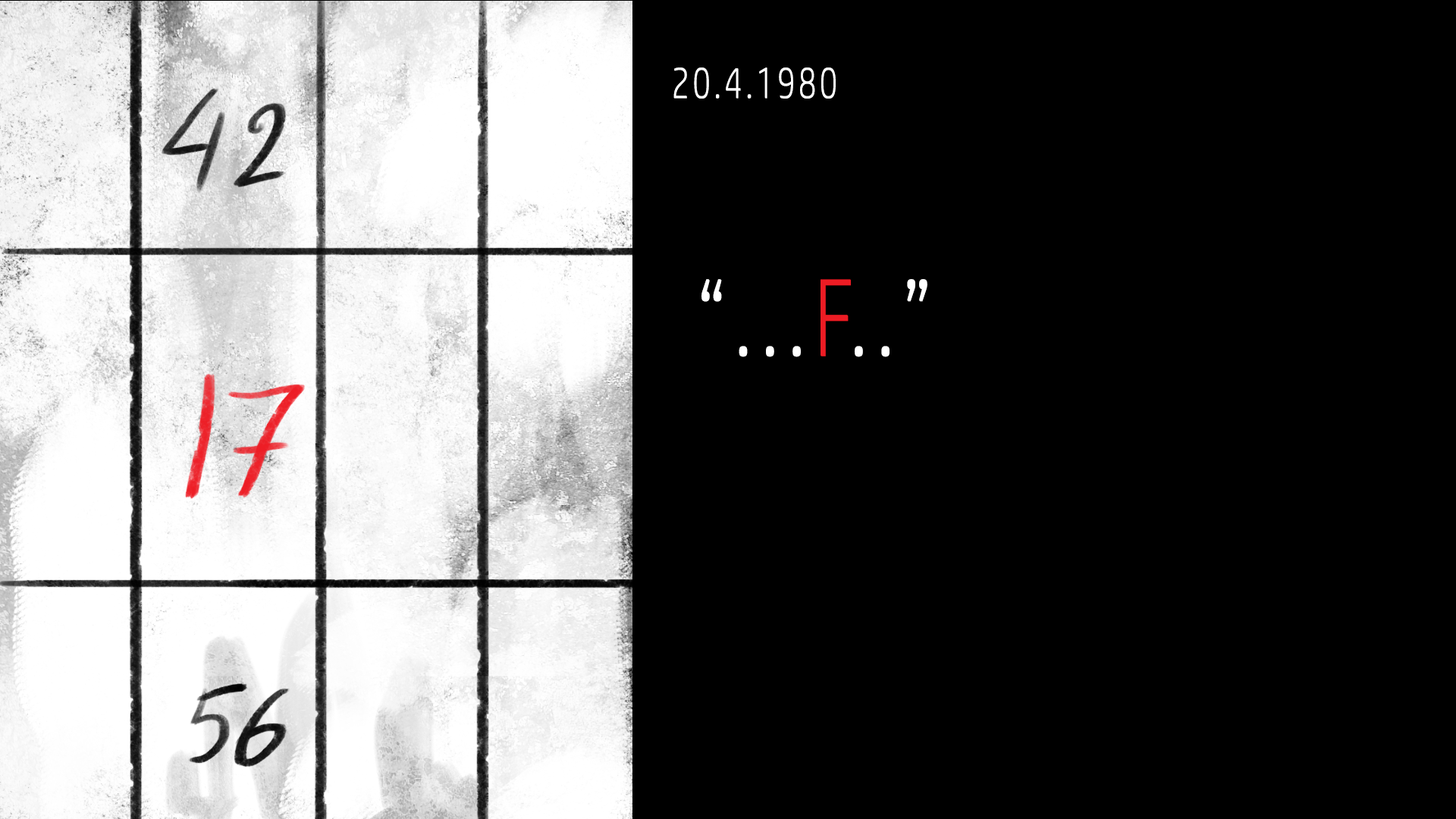
<style>
.page{position:relative;width:1456px;height:819px;background:#000000}
.page>*{position:absolute;margin:0}
.t1{font:18.2px "HPSimplified-Light";letter-spacing:0.1em;color:#ffffff;scale:0.75 1}
.t2{font:189.6px "HPSimplified-Light";letter-spacing:0.1em;color:#ffffff;scale:0.75 1}
.t3{font:189.6px "HPSimplified-Light";letter-spacing:0.1em;color:#ed1c24;scale:0.75 1}
</style>
<div class="page">
<p class="t1" style="left:673px;top:67px;width:254px;height:290px">20.4.1980 <br><br><br>    <br><br><span class="t2"> “...</span><span class="t3">F</span><span class="t2">..”</span></p>
</div>
